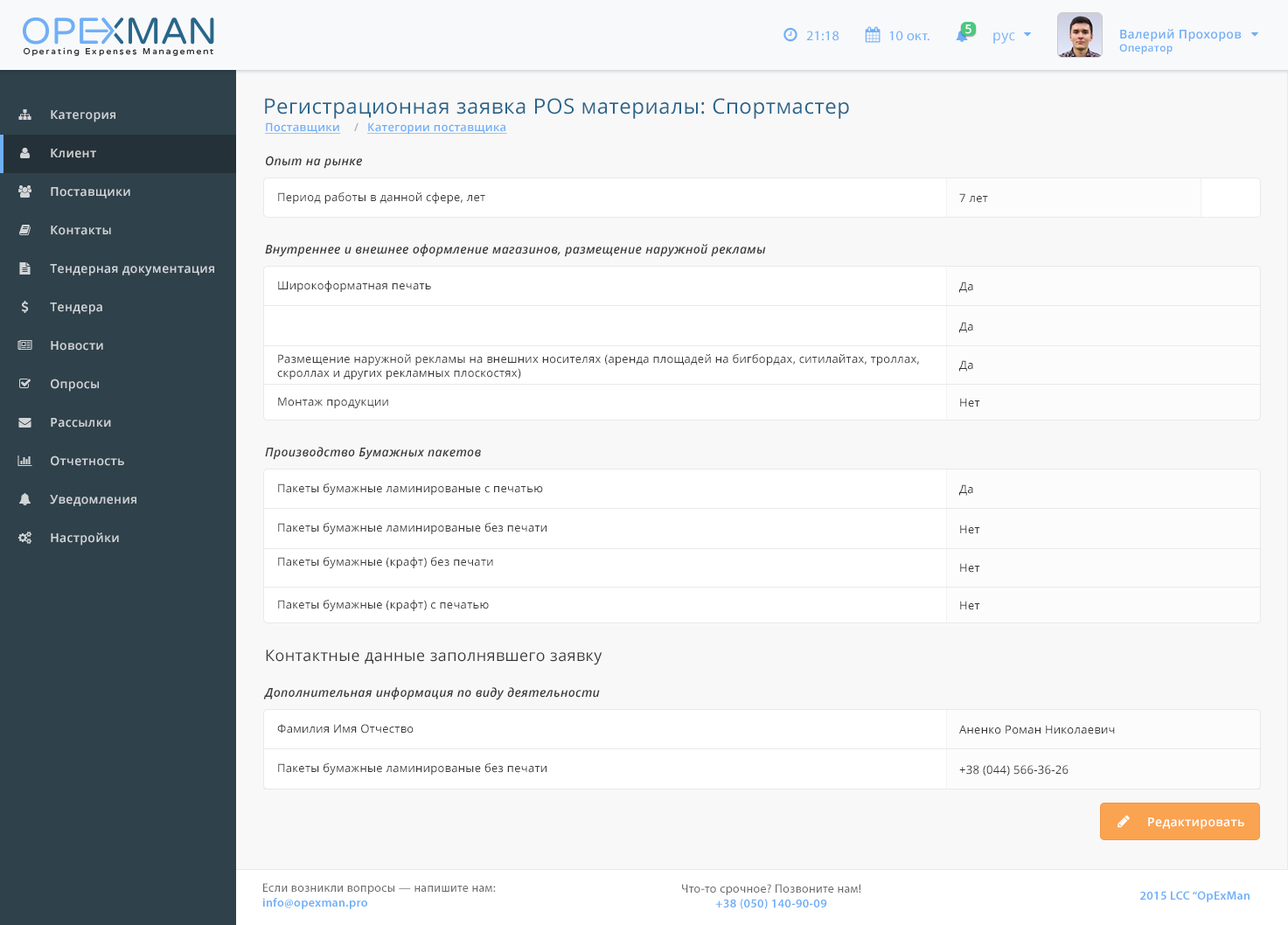
<style>
.page{position:relative;width:1288px;height:925px;background:#f8f8f8}
.page>*{position:absolute;margin:0}
.t1{font:12.2px "OpenSans-Semibold";letter-spacing:0.025em;color:#ffffff}
.t2{font:12.2px "OpenSans-Semibold";letter-spacing:0.025em;color:#6eaef7}
.t3{font:10.5px "OpenSans-Semibold";letter-spacing:0.025em;color:#6eaef7}
.t4{font:13.9px "MyriadPro-Regular";letter-spacing:0.025em;color:#6faff8}
.t5{font:13.9px "OpenSans";letter-spacing:0.025em;color:#6eaff8}
.t6{font:20.9px "OpenSans";letter-spacing:0.025em;color:#29658b}
.t7{font:12.2px "OpenSans-Semibold";letter-spacing:0.025em;color:#d2d5d7}
.t8{font:11.3px "OpenSans-Semibold";letter-spacing:0.025em;color:#6faff8;text-decoration:underline}
.t9{font:11.3px "OpenSans-Semibold";letter-spacing:0.025em;color:#afafaf}
.t10{font:12.2px "OpenSans-SemiboldItalic";letter-spacing:0.025em;color:#373838}
.t11{font:11.3px "OpenSans";letter-spacing:0.025em;color:#373838}
.t12{font:11.3px "OpenSans";letter-spacing:0.025em;color:#333333}
.t13{font:15.7px "OpenSans";letter-spacing:0.025em;color:#373838}
.t14{font:12.2px "MyriadPro-Regular";letter-spacing:0.025em;color:#696969}
.t15{font:12.2px "MyriadPro-Semibold";letter-spacing:0.025em;color:#6eaef8}
</style>
<div class="page">
<p class="t1" style="left:966px;top:24px;width:6px;height:10px">5</p>
<p class="t2" style="left:1120px;top:29px;width:122px;height:25px">Валерий Прохоров<br><span class="t3">Оператор</span></p>
<p class="t4" style="left:806px;top:31px;width:34px;height:10px">21:18</p>
<p class="t4" style="left:890px;top:31px;width:40px;height:10px">10 окт.</p>
<p class="t5" style="left:994px;top:32px;width:22px;height:12px">рус</p>
<p class="t6" style="left:265px;top:98px;width:584px;height:21px">Регистрационная заявка POS материалы: Спортмастер</p>
<p class="t7" style="left:51px;top:110px;width:64px;height:12px">Категория</p>
<p class="t8" style="left:265px;top:122px;width:76px;height:12px">Поставщики</p>
<p class="t9" style="left:354px;top:122px;width:5px;height:9px">/</p>
<p class="t8" style="left:367px;top:122px;width:140px;height:12px">Категории поставщика</p>
<p class="t7" style="left:51px;top:149px;width:45px;height:9px">Клиент</p>
<p class="t10" style="left:266px;top:156px;width:96px;height:13px">Опыт на рынке</p>
<p class="t7" style="left:51px;top:187px;width:79px;height:12px">Поставщики</p>
<p class="t11" style="left:278px;top:192px;width:207px;height:12px">Период работы в данной сфере, лет</p>
<p class="t11" style="left:960px;top:193px;width:28px;height:10px">7 лет</p>
<p class="t7" style="left:51px;top:226px;width:60px;height:9px">Контакты</p>
<p class="t10" style="left:265px;top:244px;width:501px;height:13px">Внутреннее и внешнее оформление магазинов, размещение наружной рекламы</p>
<p class="t7" style="left:50px;top:264px;width:164px;height:12px">Тендерная документация</p>
<p class="t11" style="left:278px;top:281px;width:153px;height:11px">Широкоформатная печать</p>
<p class="t12" style="left:960px;top:282px;width:14px;height:11px">Да</p>
<p class="t7" style="left:50px;top:303px;width:52px;height:12px">Тендера</p>
<p class="t12" style="left:960px;top:322px;width:14px;height:11px">Да</p>
<p class="t7" style="left:51px;top:341px;width:52px;height:10px">Новости</p>
<p class="t11" style="left:277px;top:354px;width:642px;height:26px">Размещение наружной рекламы на внешних носителях (аренда площадей на бигбордах, ситилайтах, троллах, <br>скроллах и других рекламных плоскостях)</p>
<p class="t12" style="left:960px;top:360px;width:14px;height:12px">Да</p>
<p class="t7" style="left:51px;top:379px;width:48px;height:13px">Опросы</p>
<p class="t11" style="left:278px;top:397px;width:110px;height:11px">Монтаж продукции</p>
<p class="t12" style="left:960px;top:398px;width:21px;height:10px">Нет</p>
<p class="t7" style="left:51px;top:418px;width:60px;height:10px">Рассылки</p>
<p class="t10" style="left:265px;top:447px;width:216px;height:13px">Производство Бумажных пакетов</p>
<p class="t7" style="left:51px;top:456px;width:73px;height:10px">Отчетность</p>
<p class="t11" style="left:278px;top:484px;width:265px;height:11px">Пакеты бумажные ламинированые с печатью</p>
<p class="t12" style="left:960px;top:485px;width:14px;height:11px">Да</p>
<p class="t7" style="left:50px;top:495px;width:86px;height:11px">Уведомления</p>
<p class="t7" style="left:51px;top:533px;width:68px;height:13px">Настройки</p>
<p class="t11" style="left:278px;top:523px;width:269px;height:11px">Пакеты бумажные ламинированые без печати</p>
<p class="t12" style="left:960px;top:525px;width:21px;height:9px">Нет</p>
<p class="t11" style="left:278px;top:557px;width:215px;height:12px">Пакеты бумажные (крафт) без печати</p>
<p class="t12" style="left:960px;top:563px;width:21px;height:10px">Нет</p>
<p class="t11" style="left:278px;top:600px;width:211px;height:11px">Пакеты бумажные (крафт) с печатью</p>
<p class="t12" style="left:960px;top:601px;width:21px;height:10px">Нет</p>
<p class="t13" style="left:266px;top:650px;width:337px;height:16px">Контактные данные заполнявшего заявку</p>
<p class="t10" style="left:263px;top:688px;width:337px;height:13px">Дополнительная информация по виду деятельности</p>
<p class="t11" style="left:277px;top:724px;width:137px;height:10px">Фамилия Имя Отчество</p>
<p class="t12" style="left:960px;top:725px;width:155px;height:10px">Аненко Роман Николаевич</p>
<p class="t11" style="left:278px;top:764px;width:269px;height:11px">Пакеты бумажные ламинированые без печати</p>
<p class="t12" style="left:960px;top:765px;width:109px;height:11px">+38 (044) 566-36-26</p>
<p class="t1" style="left:1149px;top:818px;width:96px;height:12px">Редактировать</p>
<p class="t14" style="left:262px;top:883px;width:234px;height:27px">Если возникли вопросы — напишите нам:<br><span class="t15">info@opexman.pro</span></p>
<p class="t14" style="left:682px;top:884px;width:180px;height:26px;text-align:center">Что-то срочное? Позвоните нам!<br><span class="t15">+38 (050) 140-90-09</span></p>
<p class="t15" style="left:1141px;top:891px;width:109px;height:12px">2015 LCC “OpExMan</p>
</div>
